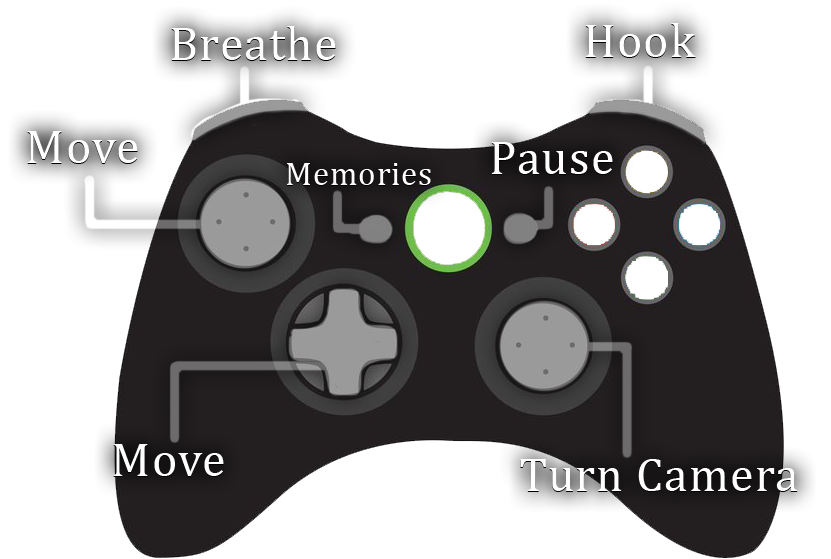
<style>
.page{position:relative;width:831px;height:559px;background:#ffffff}
.page>*{position:absolute;margin:0}
.t1{font:48px "Cambria";letter-spacing:0.025em;color:#ffffff}
.t2{font:33px "Cambria";letter-spacing:0.025em;color:#ffffff}
</style>
<div class="page">
<p class="t1" style="left:171px;top:26px;width:165px;height:34px">Breathe</p>
<p class="t1" style="left:585px;top:23px;width:111px;height:34px">Hook</p>
<p class="t1" style="left:27px;top:131px;width:111px;height:32px">Move</p>
<p class="t1" style="left:491px;top:142px;width:122px;height:32px">Pause</p>
<p class="t2" style="left:287px;top:163px;width:144px;height:22px">Memories</p>
<p class="t1" style="left:113px;top:444px;width:111px;height:32px">Move</p>
<p class="t1" style="left:520px;top:459px;width:278px;height:32px">Turn Camera</p>
</div>
